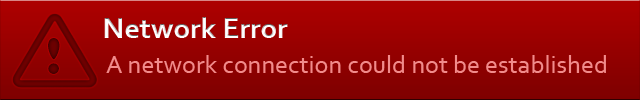
<style>
.page{position:relative;width:640px;height:100px}
.page>*{position:absolute;margin:0}
.t1{font:30px "Corbel-Bold";color:#ffffff}
.t2{font:48px "CooperBlackStd";color:#5b0000}
.t3{font:26px "Corbel";color:#f18b8b}
</style>
<div class="page">
<p class="t1" style="left:104px;top:17px;width:184px;height:21px">Network Error</p>
<p class="t2" style="left:48px;top:38px;width:12px;height:36px">!</p>
<p class="t3" style="left:106px;top:55px;width:500px;height:18px">A network connection could not be established</p>
</div>
